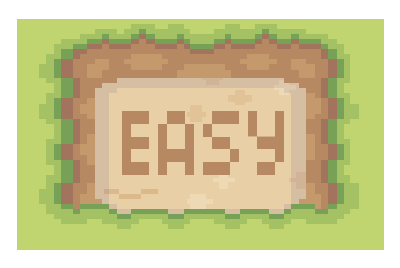
<style>
.page{position:relative;width:400px;height:268px;background:#c0d470}
.page>*{position:absolute;margin:0}
.t1{font:102.1px "04b03";color:#b68962;scale:0.71 1}
</style>
<div class="page">
<p class="t1" style="left:122px;top:111px;width:162px;height:64px">EASY</p>
</div>
